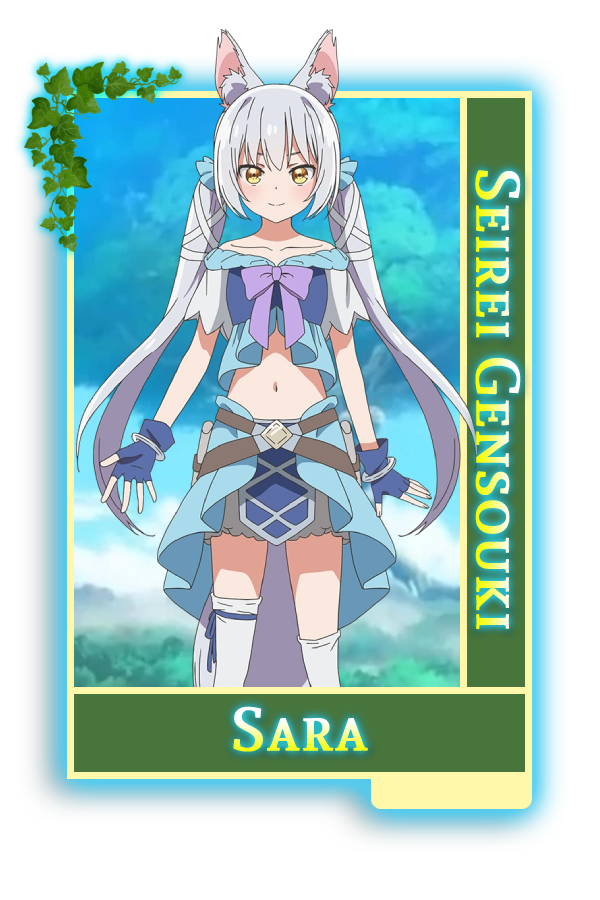
<style>
.page{position:relative;width:600px;height:900px}
.page>*{position:absolute;margin:0}
.t1{font:61px "AndadaSC-Regular";font-weight:bold}
</style>
<div class="page">
<p class="t1" style="left:475px;top:170px;width:46px;height:460px;rotate:90deg">Seirei Gensouki</p>
<p class="t1" style="left:233px;top:706px;width:135px;height:46px">Sara</p>
</div>
